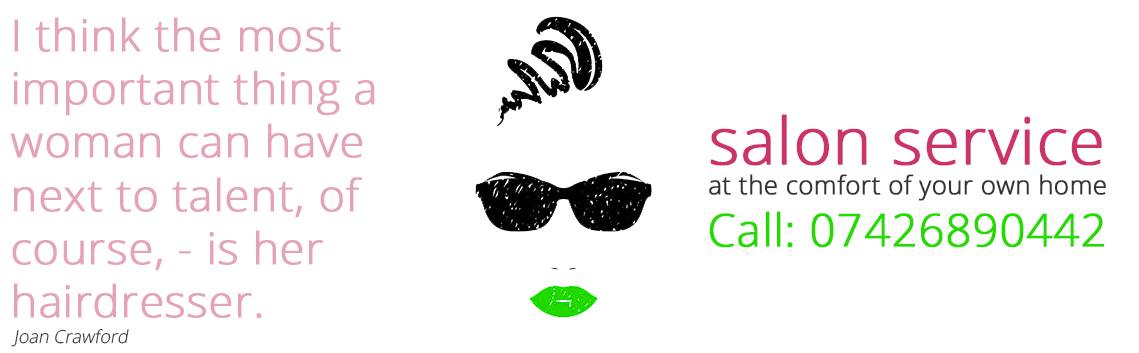
<style>
.page{position:relative;width:1139px;height:353px;background:#ffffff}
.page>*{position:absolute;margin:0}
.t1{font:44.3px "OpenSans-Light";color:#e4a4b5;font-weight:bold}
.t2{font:25.4px "OpenSans-Light";color:#333333;font-weight:bold}
.t3{font:65px "OpenSans-Light";color:#cc3366;font-weight:bold}
.t4{font:45.3px "OpenSans-Light";color:#24db00;font-weight:bold}
.t5{font:18px "OpenSans-Light";color:#333333;font-style:italic}
</style>
<div class="page">
<p class="t1" style="left:10px;top:17px;width:365px;height:301px">I think the most <br>important thing a <br>woman can have <br>next to talent, of <br>course, - is her <br>hairdresser.</p>
<p class="t2" style="left:709px;top:114px;width:397px;height:87px"><span class="t3">salon service<br></span>at the comfort of your own home</p>
<p class="t4" style="left:709px;top:211px;width:395px;height:37px">Call: 07426890442</p>
<p class="t5" style="left:11px;top:329px;width:118px;height:18px">Joan Crawford</p>
</div>
